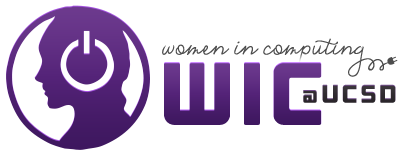
<style>
.page{position:relative;width:398px;height:156px;background:#ffffff}
.page>*{position:absolute;margin:0}
.t1{font:34.2px "EmilyLimeAlternate1";color:#4d4d4d}
.t2{font:89.2px "Outage-Regular";color:#542378;text-transform:uppercase}
.t3{font:25.4px "Outage-Regular";letter-spacing:0.05em;color:#302b30;text-transform:uppercase}
.t4{font:36px "ONRAMP";letter-spacing:0.05em;color:#302b30;text-transform:uppercase}
</style>
<div class="page">
<p class="t1" style="left:162px;top:38px;width:230px;height:39px">womenincomputing</p>
<p class="t2" style="left:164px;top:62px;width:158px;height:63px">wic</p>
<p class="t3" style="left:303px;top:84px;width:93px;height:19px"><span class="t4">@</span>ucsd</p>
</div>
